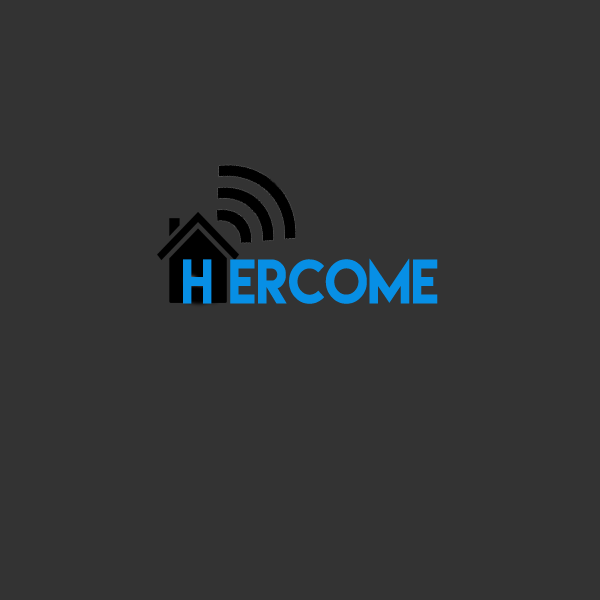
<style>
.page{position:relative;width:600px;height:600px;background:#333333}
.page>*{position:absolute;margin:0}
.t1{font:55.5px "LemonMilk";color:#078fe5;scale:0.92 1}
</style>
<div class="page">
<p class="t1" style="left:183px;top:258px;width:255px;height:46px">H ercome</p>
</div>
